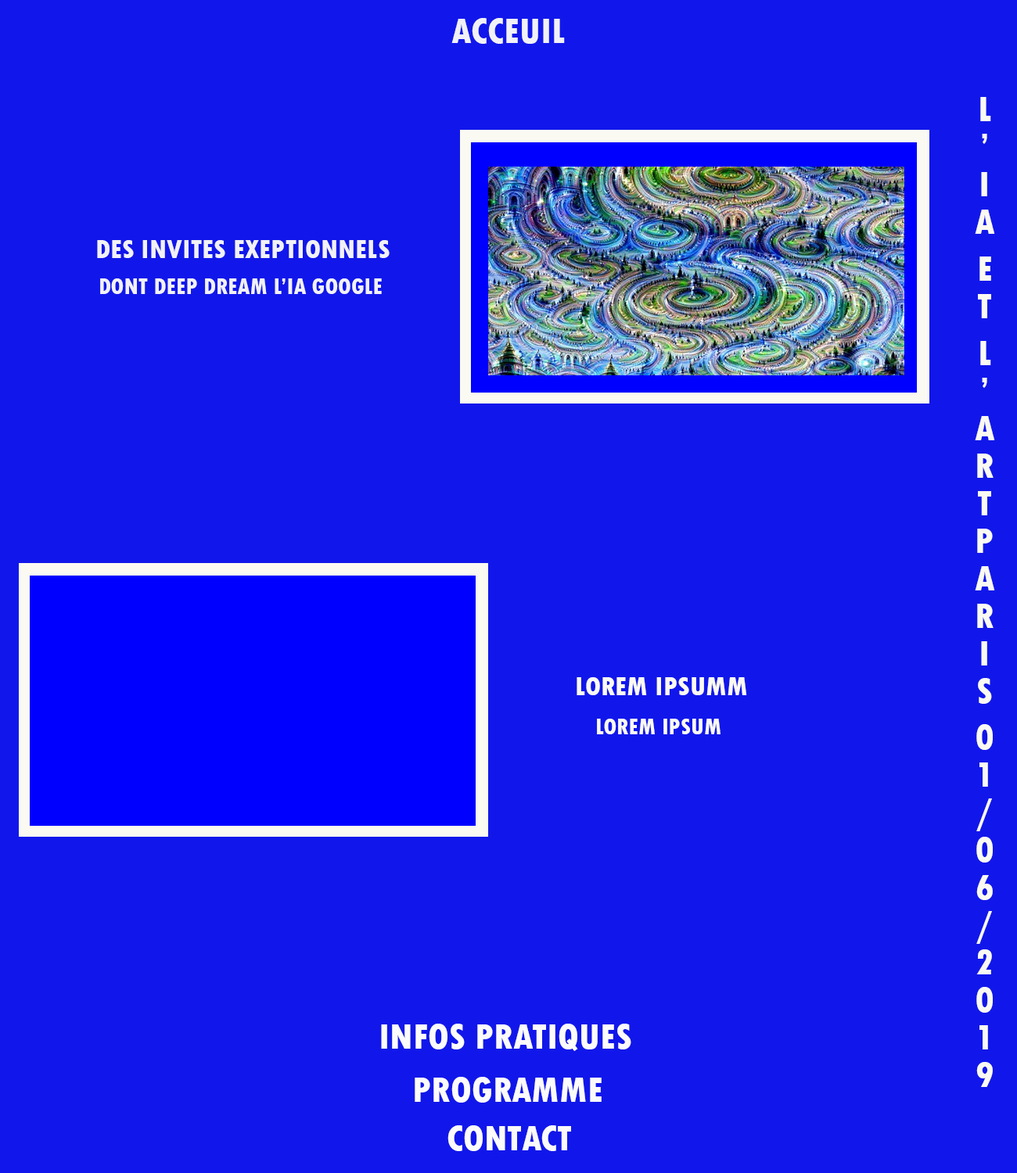
<style>
.page{position:relative;width:1017px;height:1173px;background:#1117ea}
.page>*{position:absolute;margin:0}
.t1{font:37.5px "TwCenMT-CondensedExtraBold";color:#f1f1f7}
.t2{font:37.5px/9.4px "TwCenMT-CondensedExtraBold";color:#fafaf3}
.t3{font:28.2px "TwCenMT-CondensedExtraBold";color:#f1f1f7}
.t4{font:23.5px "TwCenMT-CondensedExtraBold";color:#f1f1f7}
.t5{font:28.2px "TwCenMT-CondensedExtraBold";color:#fafaf3}
.t6{font:23.5px "TwCenMT-CondensedExtraBold";color:#fafaf3}
.t7{font:37.5px "TwCenMT-CondensedExtraBold";color:#fbfbfb}
</style>
<div class="page">
<p class="t1" style="left:451px;top:18px;width:114px;height:26px">ACCEUIL</p>
<p class="t2" style="left:974px;top:97px;width:21px;height:990px;text-align:center">L’IA ET L’ARTPARIS 01/06/2019</p>
<p class="t3" style="left:97px;top:240px;width:292px;height:18px">DES INVITES EXEPTIONNELS</p>
<p class="t4" style="left:100px;top:278px;width:282px;height:16px">DONT DEEP DREAM L’IA GOOGLE</p>
<p class="t5" style="left:576px;top:677px;width:171px;height:18px">LOREM IPSUMM</p>
<p class="t6" style="left:597px;top:719px;width:123px;height:15px">LOREM IPSUM</p>
<p class="t7" style="left:381px;top:1024px;width:250px;height:27px">INFOS PRATIQUES</p>
<p class="t7" style="left:414px;top:1077px;width:187px;height:26px">PROGRAMME</p>
<p class="t7" style="left:447px;top:1125px;width:124px;height:26px">CONTACT</p>
</div>
